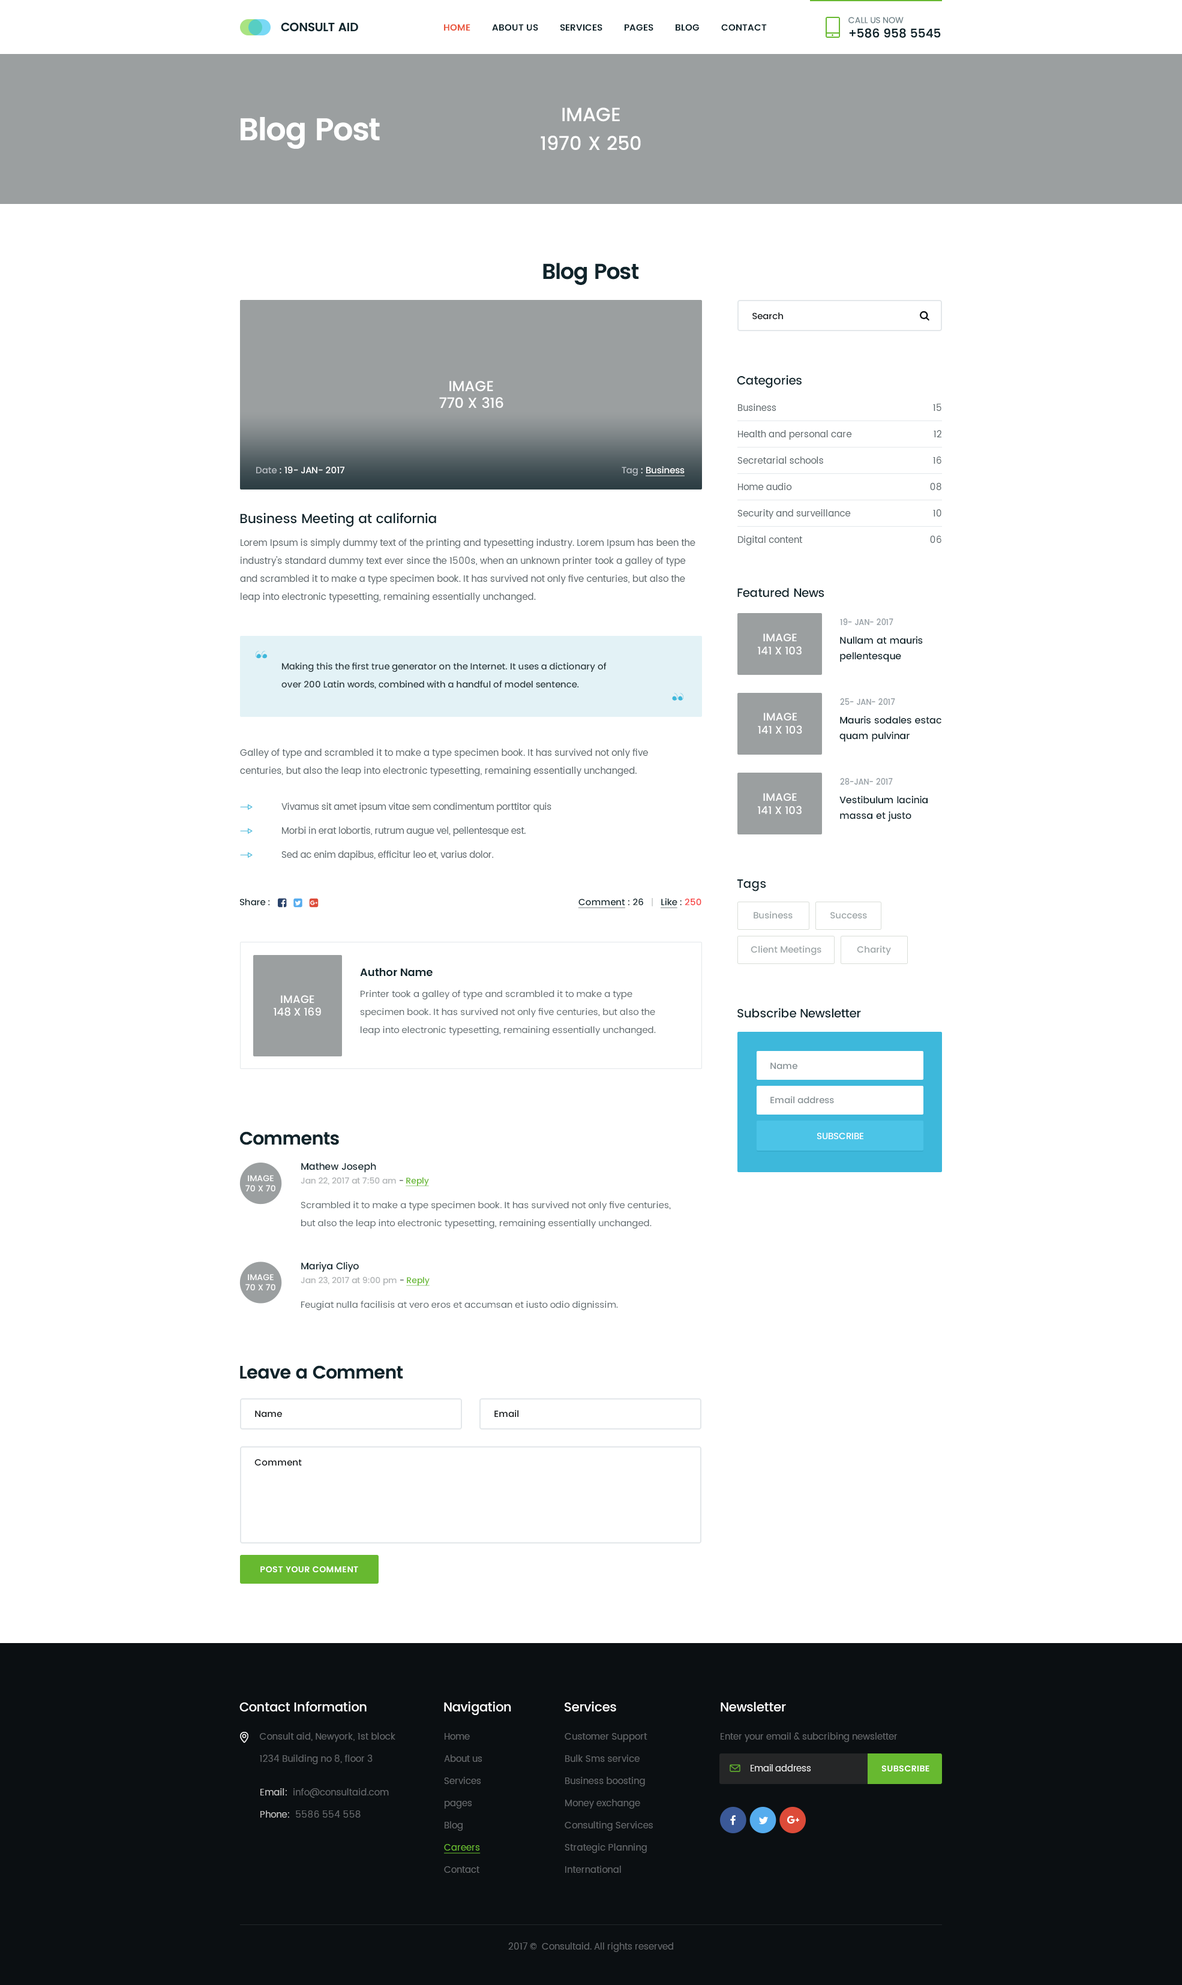
<style>
.page{position:relative;width:1182px;height:1985px;background:#ffffff}
.page>*{position:absolute;margin:0}
.t1{font:12px "Poppins-Medium";letter-spacing:-0.005em;color:#10242b;text-transform:uppercase}
.t2{font:8.4px "Poppins-Regular";letter-spacing:-0.005em;color:#718389;text-transform:uppercase}
.t3{font:9px "Poppins-SemiBold";color:#10242b;text-transform:uppercase}
.t4{font:9px "Poppins-SemiBold";color:#e9563d;text-transform:uppercase}
.t5{font:19.2px/28.8px "Poppins-Medium";color:#ffffff;text-transform:uppercase}
.t6{font:31.3px "Poppins-SemiBold";letter-spacing:-0.03em;color:#ffffff}
.t7{font:21.6px "Poppins-SemiBold";letter-spacing:-0.03em;color:#10242b}
.t8{font:9px "Poppins-Medium";color:#0b0f12}
.t9{font:12px "Poppins-Medium";letter-spacing:-0.01em;color:#10242b}
.t10{font:14.4px "Poppins-Medium";color:#ffffff;text-transform:uppercase}
.t11{font:9px/26.4px "Poppins-Regular";letter-spacing:0.01em;color:#5c666a}
.t12{font:9px "Poppins-Medium";letter-spacing:-0.01em;color:#ffffff}
.t13{font:9px "Poppins-Medium";letter-spacing:-0.01em;color:#b5bbc1}
.t14{font:9px "Poppins-Medium";letter-spacing:-0.01em;color:#ffffff;text-decoration:underline}
.t15{font:13.2px "Poppins-Medium";letter-spacing:-0.01em;color:#10242b}
.t16{font:9px/18px "Poppins-Regular";letter-spacing:0.01em;color:#5c666a}
.t17{font:7.8px "Poppins-Medium";letter-spacing:-0.01em;color:#98a0a6}
.t18{font:10.8px "Poppins-Medium";color:#ffffff;text-transform:uppercase}
.t19{font:9.6px/15.6px "Poppins-Medium";letter-spacing:-0.01em;color:#10242b}
.t20{font:30px "PortVintage-Reg";letter-spacing:-0.01em;color:#3db8db}
.t21{font:9px/18px "Poppins-Medium";letter-spacing:-0.01em;color:#2c3a3e}
.t22{font:9px/24px "Poppins-Regular";letter-spacing:-0.01em;color:#5c666a}
.t23{font:9px "Poppins-Medium";letter-spacing:-0.01em;color:#10242b}
.t24{font:9px "Poppins-Medium";letter-spacing:-0.01em;color:#10242b;text-decoration:underline}
.t25{font:9px "Poppins-Medium";letter-spacing:-0.01em;color:#cccece}
.t26{font:9px "Poppins-Medium";letter-spacing:-0.01em;color:#f74242}
.t27{font:9px "Poppins-Medium";color:#9ba3a5}
.t28{font:10.8px "Poppins-SemiBold";letter-spacing:-0.01em;color:#10242b}
.t29{font:9px "Poppins-Medium";color:#858f93}
.t30{font:18px "Poppins-SemiBold";letter-spacing:-0.03em;color:#10242b}
.t31{font:9px "Poppins-Medium";color:#ffffff}
.t32{font:8.4px/13.8px "Poppins-Medium";letter-spacing:-0.01em;color:#b0b3b5}
.t33{font:9.6px/13.8px "Poppins-Medium";letter-spacing:-0.01em;color:#10242b}
.t34{font:8.4px/13.8px "Poppins-Medium";letter-spacing:-0.01em;color:#10242b}
.t35{font:8.4px/13.8px "Poppins-Medium";letter-spacing:-0.01em;color:#67b930;text-decoration:underline}
.t36{font:8.4px "Poppins-Medium";color:#ffffff;text-transform:uppercase}
.t37{font:9px "Poppins-Regular";letter-spacing:0.01em;color:#5c666a}
.t38{font:8.4px "Poppins-SemiBold";letter-spacing:0.025em;color:#ffffff;text-transform:uppercase}
.t39{font:12.6px "Poppins-Medium";letter-spacing:-0.01em;color:#ffffff}
.t40{font:9px/22.2px "Poppins-Regular";letter-spacing:0.01em;color:#64676a}
.t41{font:9px/22.2px "Poppins-Regular";color:#64676a}
.t42{font:9px/22.2px "Poppins-Regular";color:#67b930;text-decoration:underline}
.t43{font:9px "Poppins-Regular";color:#64676a}
.t44{font:8.7px "Poppins-Regular";color:#ececec}
.t45{font:9px/22.2px "Poppins-Regular";letter-spacing:0.01em;color:#c5c5c5}
.t46{font:9px/22.2px "Poppins-Regular";letter-spacing:0.01em;color:#c4c4c4}
</style>
<div class="page">
<p class="t1" style="left:848px;top:17px;width:93px;height:21px"><span class="t2">Call us now<br></span>+586 958 5545</p>
<p class="t3" style="left:444px;top:24px;width:323px;height:7px"><span class="t4">Home</span>         about us         services         Pages         blog         contact</p>
<p class="t5" style="left:541px;top:107px;width:100px;height:43px;text-align:center">Image<br>1970 x 250</p>
<p class="t6" style="left:241px;top:117px;width:139px;height:32px">Blog Post</p>
<p class="t7" style="left:543px;top:263px;width:96px;height:22px">Blog Post</p>
<p class="t8" style="left:752px;top:313px;width:31px;height:7px">Search</p>
<p class="t9" style="left:737px;top:375px;width:65px;height:13px">Categories</p>
<p class="t10" style="left:439px;top:381px;width:64px;height:27px;text-align:center">Image<br>770 x 316</p>
<p class="t11" style="left:737px;top:404px;width:115px;height:141px">Business<br>Health and personal care<br>Secretarial schools<br>Home audio<br>Security and surveillance<br>Digital content</p>
<p class="t11" style="left:930px;top:404px;width:12px;height:139px;text-align:right">15<br>12<br>16<br>08<br>10<br>06</p>
<p class="t12" style="left:256px;top:466px;width:88px;height:8px"><span class="t13">Date </span>: 19- JAN- 2017</p>
<p class="t14" style="left:622px;top:466px;width:63px;height:10px"><span class="t13">Tag</span><span class="t12"> : </span>Business</p>
<p class="t15" style="left:240px;top:513px;width:196px;height:14px">Business Meeting at california</p>
<p class="t16" style="left:240px;top:539px;width:455px;height:63px">Lorem Ipsum is simply dummy text of the printing and typesetting industry. Lorem Ipsum has been the industry's standard dummy text ever since the 1500s, when an unknown printer took a galley of type and scrambled it to make a type specimen book. It has survived not only five centuries, but also the leap into electronic typesetting, remaining essentially unchanged.</p>
<p class="t9" style="left:737px;top:588px;width:87px;height:10px">Featured News</p>
<p class="t17" style="left:840px;top:619px;width:53px;height:6px">19- JAN- 2017</p>
<p class="t18" style="left:758px;top:634px;width:44px;height:21px;text-align:center">Image<br>141 x 103</p>
<p class="t19" style="left:840px;top:636px;width:83px;height:26px">Nullam at mauris <br>pellentesque</p>
<p class="t20" style="left:256px;top:651px;width:12px;height:8px">“</p>
<p class="t21" style="left:281px;top:662px;width:326px;height:27px">Making this the first true generator on the Internet. It uses a dictionary of <br>over 200 Latin words, combined with a handful of model sentence.</p>
<p class="t20" style="left:672px;top:693px;width:11px;height:8px;rotate:180deg">“</p>
<p class="t17" style="left:840px;top:698px;width:55px;height:7px">25- JAN- 2017</p>
<p class="t18" style="left:758px;top:713px;width:44px;height:21px;text-align:center">Image<br>141 x 103</p>
<p class="t19" style="left:839px;top:716px;width:102px;height:26px">Mauris sodales estac<br>quam pulvinar</p>
<p class="t16" style="left:240px;top:749px;width:408px;height:27px">Galley of type and scrambled it to make a type specimen book. It has survived not only five <br>centuries, but also the leap into electronic typesetting, remaining essentially unchanged.</p>
<p class="t17" style="left:840px;top:778px;width:53px;height:7px">28-JAN- 2017</p>
<p class="t18" style="left:758px;top:793px;width:44px;height:21px;text-align:center">Image<br>141 x 103</p>
<p class="t19" style="left:839px;top:796px;width:89px;height:26px">Vestibulum lacinia <br>massa et justo</p>
<p class="t22" style="left:281px;top:803px;width:270px;height:57px">Vivamus sit amet ipsum vitae sem condimentum porttitor quis<br>Morbi in erat lobortis, rutrum augue vel, pellentesque est.<br>Sed ac enim dapibus, efficitur leo et, varius dolor.</p>
<p class="t9" style="left:737px;top:880px;width:29px;height:12px">Tags</p>
<p class="t23" style="left:240px;top:899px;width:30px;height:7px">Share :</p>
<p class="t24" style="left:578px;top:898px;width:123px;height:10px">Comment<span class="t23"> : 26   </span><span class="t25">|   </span>Like<span class="t23"> : </span><span class="t26">250</span></p>
<p class="t27" style="left:754px;top:911px;width:39px;height:8px">Business</p>
<p class="t27" style="left:830px;top:912px;width:37px;height:7px">Success</p>
<p class="t27" style="left:751px;top:946px;width:70px;height:9px">Client Meetings</p>
<p class="t27" style="left:857px;top:946px;width:34px;height:9px">Charity</p>
<p class="t28" style="left:360px;top:968px;width:73px;height:9px">Author Name</p>
<p class="t16" style="left:360px;top:990px;width:296px;height:46px">Printer took a galley of type and scrambled it to make a type specimen book. It has survived not only five centuries, but also the leap into electronic typesetting, remaining essentially unchanged.</p>
<p class="t18" style="left:274px;top:995px;width:47px;height:21px;text-align:center">Image<br>148 x 169</p>
<p class="t9" style="left:737px;top:1008px;width:124px;height:10px">Subscribe Newsletter</p>
<p class="t29" style="left:770px;top:1063px;width:27px;height:7px">Name</p>
<p class="t29" style="left:770px;top:1096px;width:64px;height:8px">Email address</p>
<p class="t30" style="left:240px;top:1132px;width:99px;height:13px">Comments</p>
<p class="t31" style="left:817px;top:1133px;width:46px;height:6px">SUBSCRIBE</p>
<p class="t32" style="left:301px;top:1163px;width:128px;height:24px"><span class="t33">Mathew Joseph<br></span>Jan 22, 2017 at 7:50 am<span class="t34"> - </span><span class="t35">Reply</span></p>
<p class="t36" style="left:245px;top:1175px;width:30px;height:17px;text-align:center">Image<br>70 x 70</p>
<p class="t16" style="left:301px;top:1201px;width:370px;height:28px">Scrambled it to make a type specimen book. It has survived not only five centuries, but also the leap into electronic typesetting, remaining essentially unchanged.</p>
<p class="t32" style="left:301px;top:1262px;width:129px;height:24px"><span class="t33">Mariya Cliyo<br></span>Jan 23, 2017 at 9:00 pm<span class="t34"> - </span><span class="t35">Reply</span></p>
<p class="t36" style="left:245px;top:1274px;width:30px;height:17px;text-align:center">Image<br>70 x 70</p>
<p class="t37" style="left:301px;top:1301px;width:317px;height:9px">Feugiat nulla facilisis at vero eros et accumsan et iusto odio dignissim.</p>
<p class="t30" style="left:240px;top:1366px;width:163px;height:13px">Leave a Comment</p>
<p class="t8" style="left:255px;top:1411px;width:27px;height:7px">Name</p>
<p class="t8" style="left:494px;top:1410px;width:24px;height:8px">Email</p>
<p class="t8" style="left:254px;top:1459px;width:48px;height:7px">Comment</p>
<p class="t38" style="left:260px;top:1567px;width:98px;height:6px">post your comment</p>
<p class="t39" style="left:239px;top:1702px;width:128px;height:10px">Contact Information</p>
<p class="t39" style="left:444px;top:1702px;width:67px;height:13px">Navigation</p>
<p class="t39" style="left:565px;top:1702px;width:51px;height:10px">Services</p>
<p class="t39" style="left:721px;top:1702px;width:65px;height:10px">Newsletter</p>
<p class="t40" style="left:260px;top:1733px;width:135px;height:32px">Consult aid, Newyork, 1st block <br>1234 Building no 8, floor 3</p>
<p class="t41" style="left:444px;top:1733px;width:38px;height:140px">Home<br>About us<br>Services<br>pages<br>Blog<br><span class="t42">Careers<br></span>Contact</p>
<p class="t40" style="left:565px;top:1733px;width:88px;height:140px">Customer Support<br>Bulk Sms service<br>Business boosting<br>Money exchange<br>Consulting Services<br>Strategic Planning<br>International</p>
<p class="t43" style="left:721px;top:1733px;width:177px;height:9px">Enter your email &amp; subcribing newsletter</p>
<p class="t44" style="left:751px;top:1765px;width:60px;height:7px">Email address</p>
<p class="t38" style="left:881px;top:1766px;width:48px;height:6px">Subscribe</p>
<p class="t40" style="left:260px;top:1789px;width:129px;height:29px"><span class="t45">Email:</span>  info@consultaid.com<br><span class="t46">Phone:</span>  5586 554 558</p>
<p class="t43" style="left:508px;top:1943px;width:165px;height:9px">2017 ©  Consultaid. All rights reserved</p>
</div>
